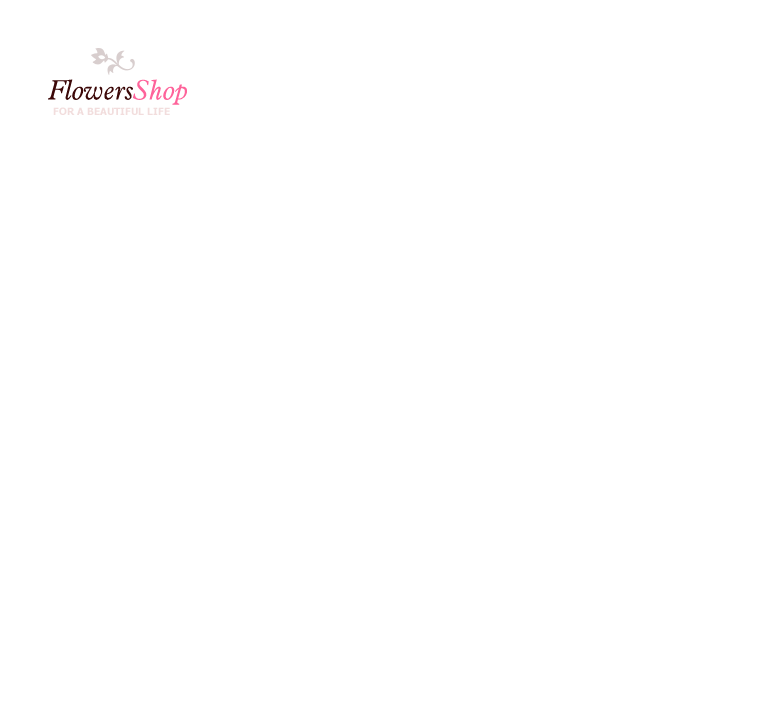
<style>
.page{position:relative;width:775px;height:710px;background:#ffffff}
.page>*{position:absolute;margin:0}
.t1{font:27px "Aldine721BT-LightItalic";color:#3c0808}
.t2{font:27px "Aldine721BT-LightItalic";color:#fe639a}
.t3{font:10px "Tahoma-Bold";color:#f2dddd;text-transform:uppercase}
</style>
<div class="page">
<p class="t1" style="left:48px;top:79px;width:139px;height:26px">Flowers<span class="t2">Shop</span></p>
<p class="t3" style="left:53px;top:107px;width:117px;height:8px">for a beautiful life</p>
</div>
